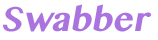
<style>
.page{position:relative;width:158px;height:40px;background:#ffffff}
.page>*{position:absolute;margin:0}
.t1{font:34px "TamilMN-Bold";color:#aa73df;font-style:italic}
</style>
<div class="page">
<p class="t1" style="left:3px;top:4px;width:149px;height:28px">Swabber</p>
</div>
